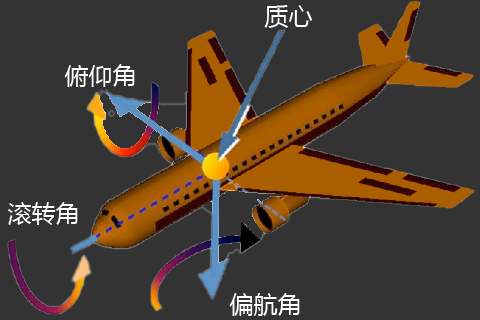
<style>
.page{position:relative;width:480px;height:320px;background:#333333}
.page>*{position:absolute;margin:0}
.t1{font:24px "MicrosoftYaHei";color:#ffffff;font-variant:small-caps}
</style>
<div class="page">
<p class="t1" style="left:264px;top:5px;width:49px;height:23px">质心</p>
<p class="t1" style="left:64px;top:64px;width:71px;height:23px">俯仰角</p>
<p class="t1" style="left:7px;top:202px;width:71px;height:23px">滚转角</p>
<p class="t1" style="left:229px;top:293px;width:71px;height:23px">偏航角</p>
</div>
